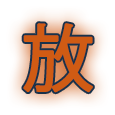
<style>
.page{position:relative;width:115px;height:115px;background:#ffffff}
.page>*{position:absolute;margin:0}
.t1{font:72px "KozGoPr6N-Regular";color:#d05b14;text-transform:uppercase;font-weight:bold}
</style>
<div class="page">
<p class="t1" style="left:23px;top:23px;width:70px;height:70px">放</p>
</div>
